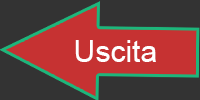
<style>
.page{position:relative;width:200px;height:100px;background:#333333}
.page>*{position:absolute;margin:0}
.t1{font:30px "ArialMT";color:#ffffff}
</style>
<div class="page">
<p class="t1" style="left:75px;top:40px;width:81px;height:22px">Uscita</p>
</div>
